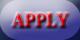
<style>
.page{position:relative;width:80px;height:40px}
.page>*{position:absolute;margin:0}
.t1{font:18px "MyungjoXB-HM"}
</style>
<div class="page">
<p class="t1" style="left:12px;top:13px;width:57px;height:14px">APPLY</p>
</div>
